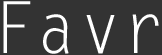
<style>
.page{position:relative;width:162px;height:55px;background:#333333}
.page>*{position:absolute;margin:0}
.t1{font:72px "LetterGothicStd";color:#fffefe}
</style>
<div class="page">
<p class="t1" style="left:3px;top:1px;width:156px;height:53px">Favr</p>
</div>
